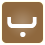
<style>
.page{position:relative;width:45px;height:45px;background:#8f683e}
.page>*{position:absolute;margin:0}
.t1{font:40.5px "BYekan";color:#ffffff}
</style>
<div class="page">
<p class="t1" style="left:7px;top:17px;width:30px;height:20px">ب</p>
</div>
